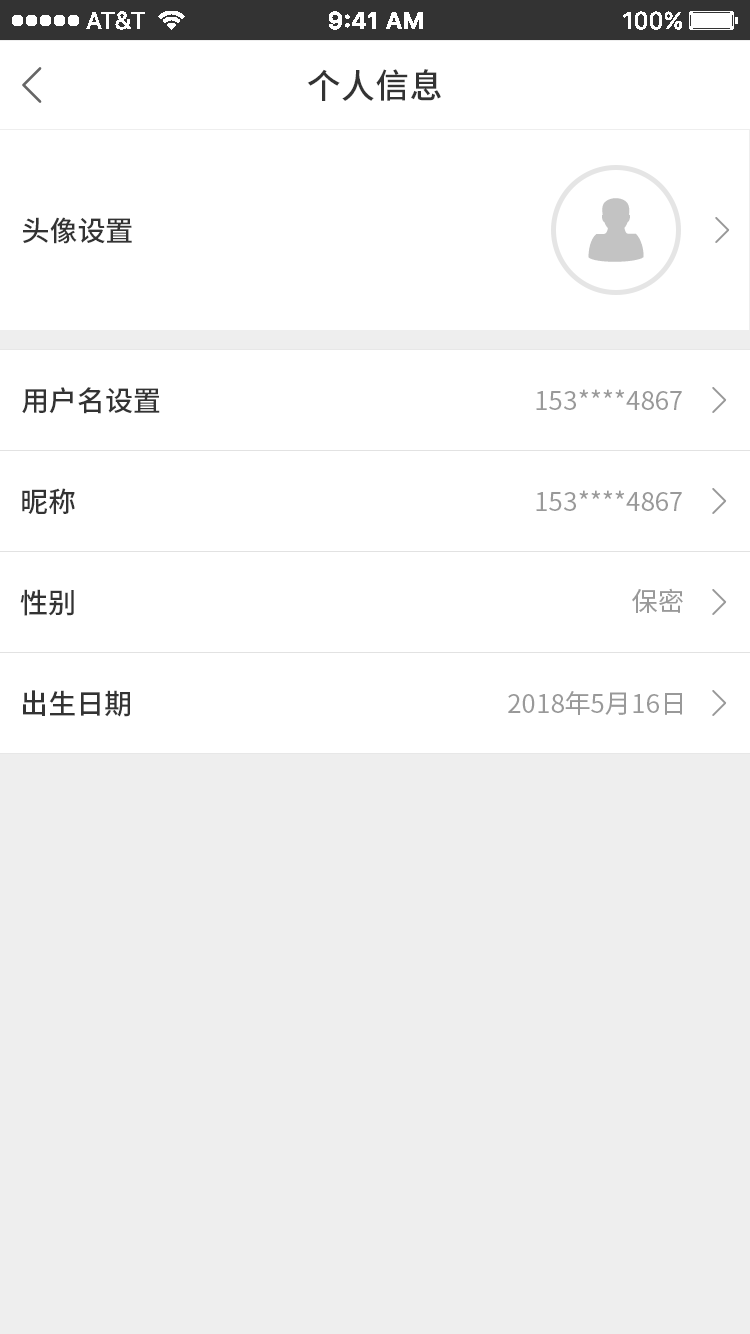
<style>
.page{position:relative;width:750px;height:1334px;background:#ffffff}
.page>*{position:absolute;margin:0}
.t1{font:34px "SourceHanSansCN-Medium";color:#333333}
.t2{font:28px "SourceHanSansCN-Medium";color:#333333}
.t3{font:26px "SourceHanSansCN-Regular";color:#999999}
</style>
<div class="page">
<p class="t1" style="left:307px;top:69px;width:134px;height:32px">个人信息</p>
<p class="t2" style="left:23px;top:217px;width:109px;height:27px">头像设置</p>
<p class="t2" style="left:22px;top:387px;width:138px;height:27px">用户名设置</p>
<p class="t3" style="left:536px;top:389px;width:146px;height:21px">153****4867</p>
<p class="t2" style="left:22px;top:488px;width:53px;height:26px">昵称</p>
<p class="t3" style="left:536px;top:490px;width:146px;height:21px">153****4867</p>
<p class="t2" style="left:20px;top:589px;width:54px;height:27px">性别</p>
<p class="t3" style="left:632px;top:588px;width:51px;height:25px">保密</p>
<p class="t2" style="left:23px;top:690px;width:107px;height:27px">出生日期</p>
<p class="t3" style="left:508px;top:691px;width:174px;height:24px">2018年5月16日</p>
</div>
